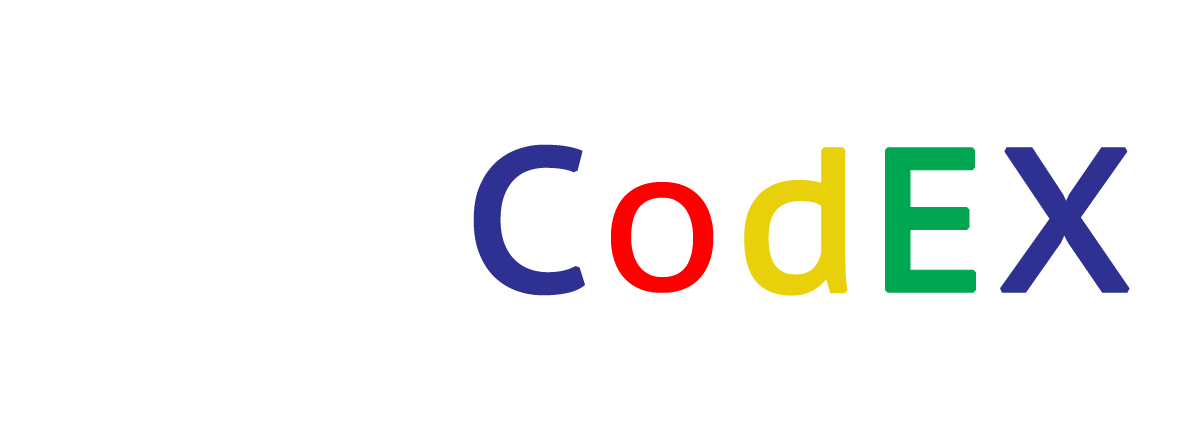
<style>
.page{position:relative;width:1200px;height:424px;background:#ffffff}
.page>*{position:absolute;margin:0}
.t1{font:200px "PTSans-Caption";letter-spacing:0.02em;color:#2e3192;font-weight:bold}
.t2{font:200px "PTSans-Caption";letter-spacing:0.02em;color:#ff0000;font-weight:bold}
.t3{font:200px "PTSans-Caption";letter-spacing:0.02em;color:#e8d10b;font-weight:bold}
.t4{font:200px "PTSans-Caption";letter-spacing:0.02em;color:#00a651;font-weight:bold}
</style>
<div class="page">
<p class="t1" style="left:473px;top:144px;width:657px;height:152px">C<span class="t2">o</span><span class="t3">d</span><span class="t4">E</span>X</p>
</div>
